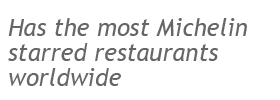
<style>
.page{position:relative;width:280px;height:100px;background:#ffffff}
.page>*{position:absolute;margin:0}
.t1{font:24px/25px "TrebuchetMS-Italic";color:#666666}
</style>
<div class="page">
<p class="t1" style="left:8px;top:18px;width:239px;height:68px">Has the most Michelin <br>starred restaurants <br>worldwide</p>
</div>
